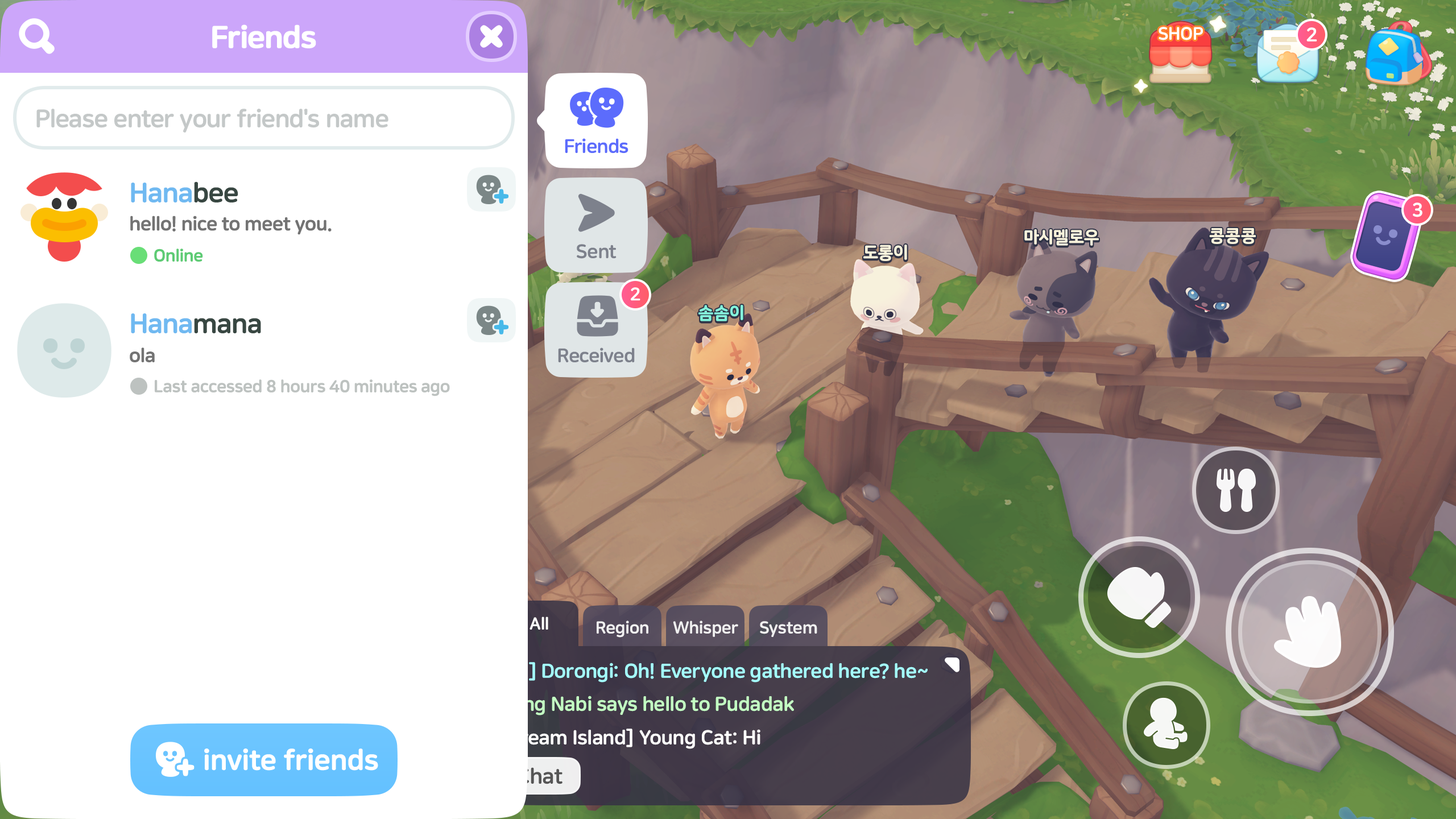
<style>
.page{position:relative;width:1456px;height:819px;background:#ffffff}
.page>*{position:absolute;margin:0}
.t1{font:30.7px "NanumSquareRoundOTFEB";letter-spacing:-0.03em;color:#ffffff;font-weight:bold}
.t2{font:25px "NanumSquareRoundOTFEB";letter-spacing:-0.025em;color:#c4c8c8}
.t3{font:19.3px "NanumSquareRoundOTFEB";letter-spacing:-0.03em;color:#5c6cfc}
.t4{font:27.3px "NanumSquareRoundOTFEB";letter-spacing:-0.025em;color:#70b9f1}
.t5{font:27.3px "NanumSquareRoundOTFEB";letter-spacing:-0.025em;color:#384742}
.t6{font:19.3px "NanumSquareRoundOTFEB";letter-spacing:-0.025em;color:#737373}
.t7{font:19.3px "NanumSquareRoundOTFEB";letter-spacing:-0.03em;color:#7d818c}
.t8{font:17.1px "NanumSquareRoundOTFEB";letter-spacing:-0.025em;color:#5dcb74}
.t9{font:18.2px "NanumSquareRoundEB";color:#ffffff}
.t10{font:17.1px "NanumSquareRoundOTFEB";letter-spacing:-0.025em;color:#bdc2c0}
.t11{font:28.4px "NanumSquareRoundOTFEB";letter-spacing:-0.03em;color:#ffffff;font-weight:bold}
</style>
<div class="page">
<p class="t1" style="left:212px;top:24px;width:104px;height:24px">Friends</p>
<p class="t2" style="left:36px;top:109px;width:352px;height:24px">Please enter your friend's name</p>
<p class="t3" style="left:565px;top:138px;width:63px;height:16px">Friends</p>
<p class="t4" style="left:131px;top:181px;width:107px;height:21px">Hana<span class="t5">bee</span></p>
<p class="t6" style="left:130px;top:216px;width:202px;height:19px">hello! nice to meet you.</p>
<p class="t7" style="left:577px;top:244px;width:40px;height:15px">Sent</p>
<p class="t8" style="left:154px;top:249px;width:49px;height:13px">Online</p>
<p class="t9" style="left:631px;top:287px;width:9px;height:14px">2</p>
<p class="t4" style="left:131px;top:313px;width:130px;height:20px">Hana<span class="t5">mana</span></p>
<p class="t6" style="left:130px;top:348px;width:25px;height:14px">ola</p>
<p class="t7" style="left:558px;top:348px;width:77px;height:15px">Received</p>
<p class="t10" style="left:155px;top:379px;width:295px;height:17px">Last accessed 8 hours 40 minutes ago</p>
<p class="t11" style="left:204px;top:748px;width:174px;height:23px">invite friends</p>
</div>
